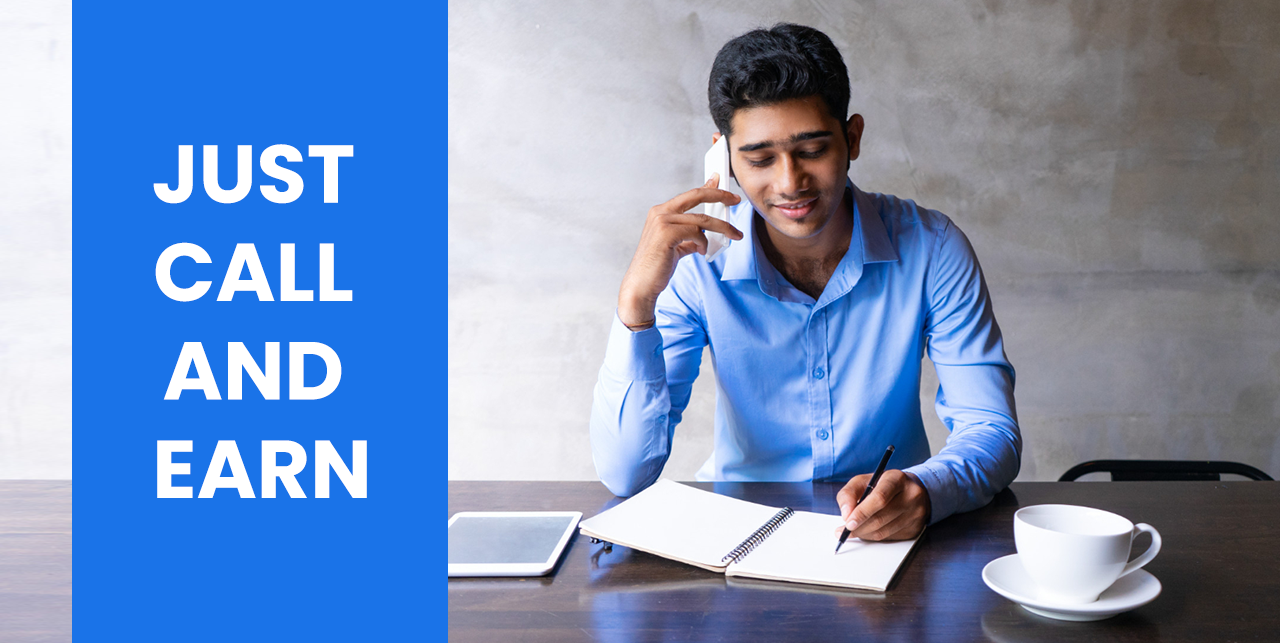
<style>
.page{position:relative;width:1280px;height:643px;background:#1a73e8}
.page>*{position:absolute;margin:0}
.t1{font:82px "Poppins-Bold";color:#ffffff;text-transform:uppercase}
</style>
<div class="page">
<p class="t1" style="left:153px;top:144px;width:214px;height:354px;text-align:center">Just <br>Call <br>and <br>Earn</p>
</div>
